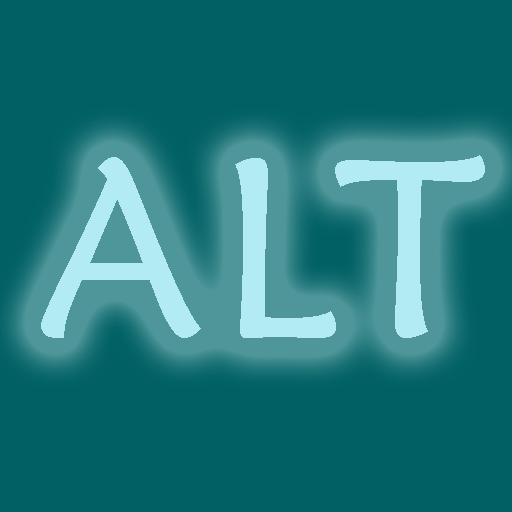
<style>
.page{position:relative;width:512px;height:512px;background:#006064}
.page>*{position:absolute;margin:0}
.t1{font:256px "MaiandraGD-Regular";letter-spacing:0.05em;color:#b2ebf2}
</style>
<div class="page">
<p class="t1" style="left:41px;top:155px;width:444px;height:183px">ALT</p>
</div>
